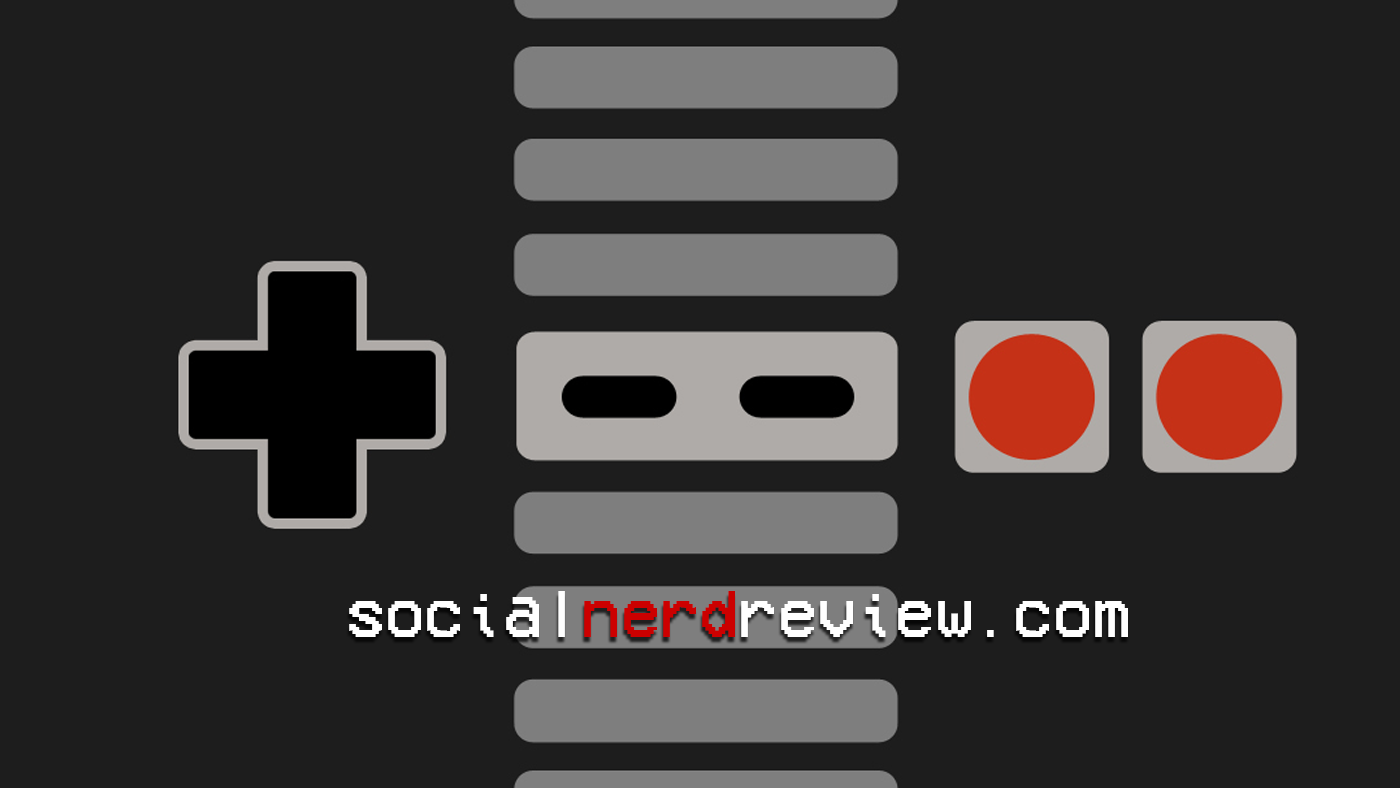
<style>
.page{position:relative;width:1400px;height:788px;background:#1d1d1d}
.page>*{position:absolute;margin:0}
.t1{font:67px "VCROSDMono";color:#ffffff}
.t2{font:67px "VCROSDMono";color:#cc0000}
</style>
<div class="page">
<p class="t1" style="left:349px;top:591px;width:779px;height:46px">social<span class="t2">nerd</span>review.com</p>
</div>
